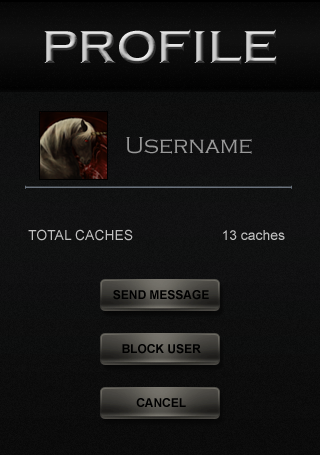
<style>
.page{position:relative;width:320px;height:455px}
.page>*{position:absolute;margin:0}
.t1{font:47.8px "CopperplateGothic-Bold"}
.t2{font:23.9px "CopperplateGothic-Light";color:#989898}
.t3{font:13.9px "ArialMT";color:#c1c1c1}
.t4{font:12px "Arial-BoldMT";color:#000000}
</style>
<div class="page">
<p class="t1" style="left:44px;top:29px;width:233px;height:36px">PROFILE</p>
<p class="t2" style="left:126px;top:137px;width:126px;height:17px">Username</p>
<p class="t3" style="left:28px;top:229px;width:105px;height:12px">TOTAL CACHES</p>
<p class="t3" style="left:223px;top:230px;width:62px;height:10px">13 caches</p>
<p class="t4" style="left:113px;top:290px;width:96px;height:10px">SEND MESSAGE</p>
<p class="t4" style="left:122px;top:344px;width:79px;height:10px">BLOCK USER</p>
<p class="t4" style="left:136px;top:398px;width:50px;height:9px">CANCEL</p>
</div>
